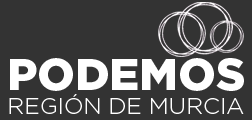
<style>
.page{position:relative;width:252px;height:120px;background:#333333}
.page>*{position:absolute;margin:0}
.t1{font:23px/24px "Gotham-Light";color:#ffffff}
.t2{font:45px/24px "Gotham-Black";color:#ffffff}
</style>
<div class="page">
<p class="t1" style="left:9px;top:58px;width:235px;height:56px;text-align:center"><span class="t2">PODEMOS<br></span>REGIÓN DE MURCIA</p>
</div>
